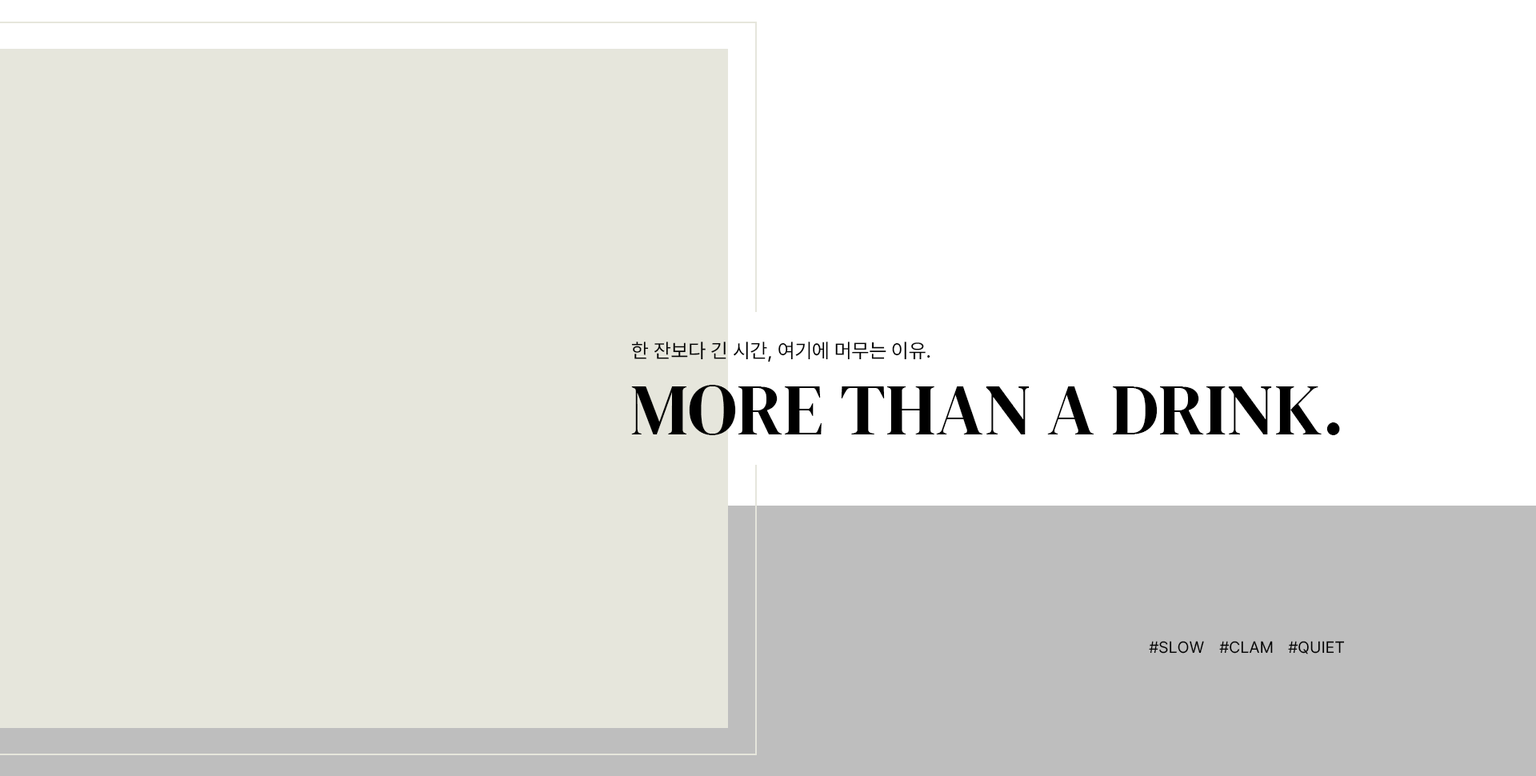
<style>
.page{position:relative;width:1536px;height:776px;background:#e6e6dc}
.page>*{position:absolute;margin:0}
.t1{font:20px "Pretendard-Regular";color:#000000;text-transform:uppercase}
.t2{font:73.2px "DMSerifDisplay-Regular";color:#000000;text-transform:uppercase}
.t3{font:16px "Pretendard-Regular";color:#000000;text-transform:uppercase}
</style>
<div class="page">
<p class="t1" style="left:631px;top:342px;width:300px;height:20px">한 잔보다 긴 시간, 여기에 머무는 이유.</p>
<p class="t2" style="left:631px;top:385px;width:709px;height:50px">More than a drink.</p>
<p class="t3" style="left:1149px;top:641px;width:55px;height:13px">#slow</p>
<p class="t3" style="left:1219px;top:641px;width:54px;height:13px">#clam</p>
<p class="t3" style="left:1288px;top:641px;width:57px;height:14px">#quiet</p>
</div>
